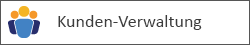
<style>
.page{position:relative;width:250px;height:45px;background:#ffffff}
.page>*{position:absolute;margin:0}
.t1{font:18px "Calibri";color:#3c3c3c}
</style>
<div class="page">
<p class="t1" style="left:58px;top:15px;width:144px;height:15px">Kunden-Verwaltung</p>
</div>
